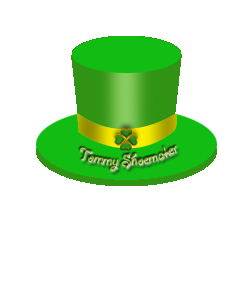
<style>
.page{position:relative;width:250px;height:300px;background:#ffffff}
.page>*{position:absolute;margin:0}
.t1{font:18px "GiddyupStd"}
</style>
<div class="page">
<p class="t1" style="left:79px;top:145px;width:98px;height:26px">Tommy Shoemaker</p>
</div>
